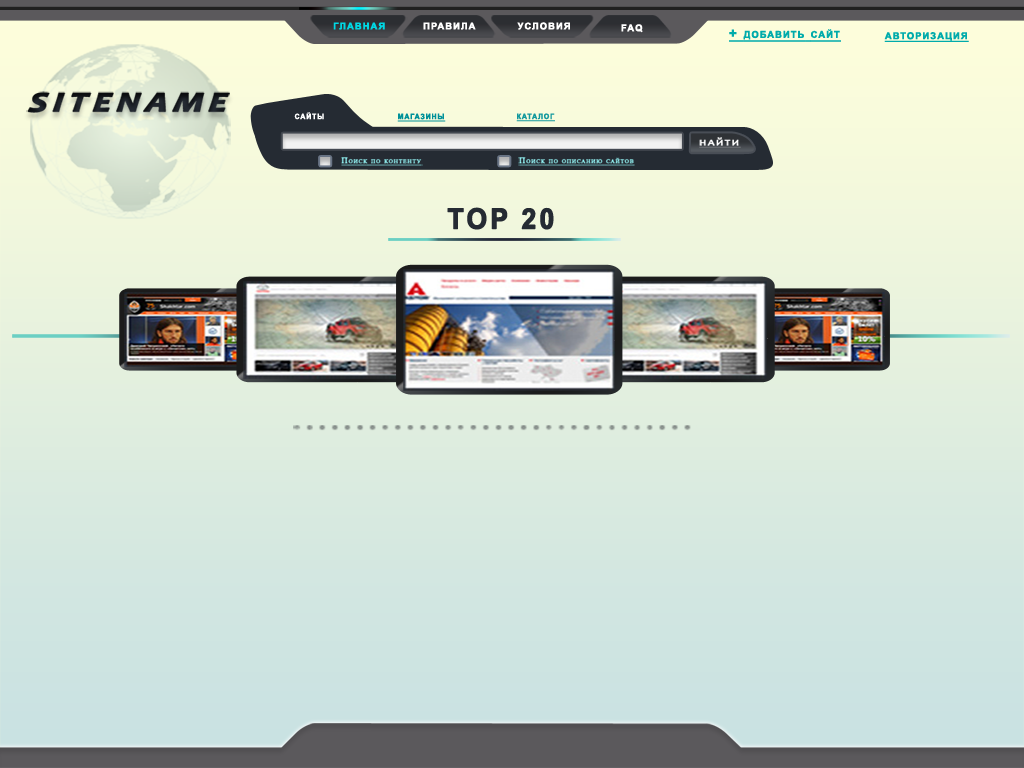
<style>
.page{position:relative;width:1024px;height:768px}
.page>*{position:absolute;margin:0}
.t1{font:13.4px "Arial-BoldMT";letter-spacing:0.1em;color:#00d7e3;font-variant:small-caps;font-weight:bold}
.t2{font:13.4px "Arial-BoldMT";letter-spacing:0.1em;color:#ffffff;font-variant:small-caps;font-weight:bold}
.t3{font:13.4px "Arial-BoldMT";letter-spacing:0.1em;color:#00abab;font-variant:small-caps;font-weight:bold;text-decoration:underline}
.t4{font:34.9px "Candara-BoldItalic";letter-spacing:0.1em;color:#252b33;font-variant:small-caps;font-weight:bold;font-style:italic;scale:1.18 1}
.t5{font:10.6px "Arial-BoldMT";letter-spacing:0.1em;color:#ffffff;font-variant:small-caps;font-weight:bold;scale:0.93 1}
.t6{font:10.6px "Arial-BoldMT";letter-spacing:0.1em;color:#009199;font-variant:small-caps;font-weight:bold;text-decoration:underline;scale:0.93 1}
.t7{font:10.6px "Arial-BoldMT";letter-spacing:0.1em;color:#11989d;font-variant:small-caps;font-weight:bold;text-decoration:underline;scale:0.93 1}
.t8{font:10.5px "Candara";letter-spacing:0.1em;color:#ffffff;font-variant:small-caps;font-weight:bold;text-decoration:underline;scale:1.18 1}
.t9{font:8.3px "TimesNewRomanPSMT";letter-spacing:0.1em;color:#99ffff;font-variant:small-caps;font-weight:bold;text-decoration:underline}
.t10{font:28.3px "Arial-BoldMT";letter-spacing:0.1em;color:#252b33;font-variant:small-caps;font-weight:bold;scale:0.93 1}
</style>
<div class="page">
<p class="t1" style="left:333px;top:22px;width:52px;height:8px">главная</p>
<p class="t2" style="left:423px;top:22px;width:53px;height:8px">правила</p>
<p class="t2" style="left:517px;top:22px;width:53px;height:8px">условия</p>
<p class="t2" style="left:621px;top:24px;width:22px;height:9px">faq</p>
<p class="t3" style="left:729px;top:29px;width:112px;height:13px">+ добавить сайт</p>
<p class="t3" style="left:884px;top:32px;width:85px;height:10px">авторизация</p>
<p class="t4" style="left:26px;top:91px;width:204px;height:22px">sitename</p>
<p class="t5" style="left:294px;top:112px;width:30px;height:8px">сайты</p>
<p class="t6" style="left:397px;top:113px;width:49px;height:9px">магазины</p>
<p class="t7" style="left:516px;top:113px;width:39px;height:9px">каталог</p>
<p class="t8" style="left:699px;top:137px;width:42px;height:11px">найти</p>
<p class="t9" style="left:341px;top:157px;width:82px;height:9px">Поиск по контенту</p>
<p class="t9" style="left:518px;top:157px;width:117px;height:9px">Поиск по описанию сайтов</p>
<p class="t10" style="left:447px;top:207px;width:107px;height:23px">TOP 20</p>
</div>
